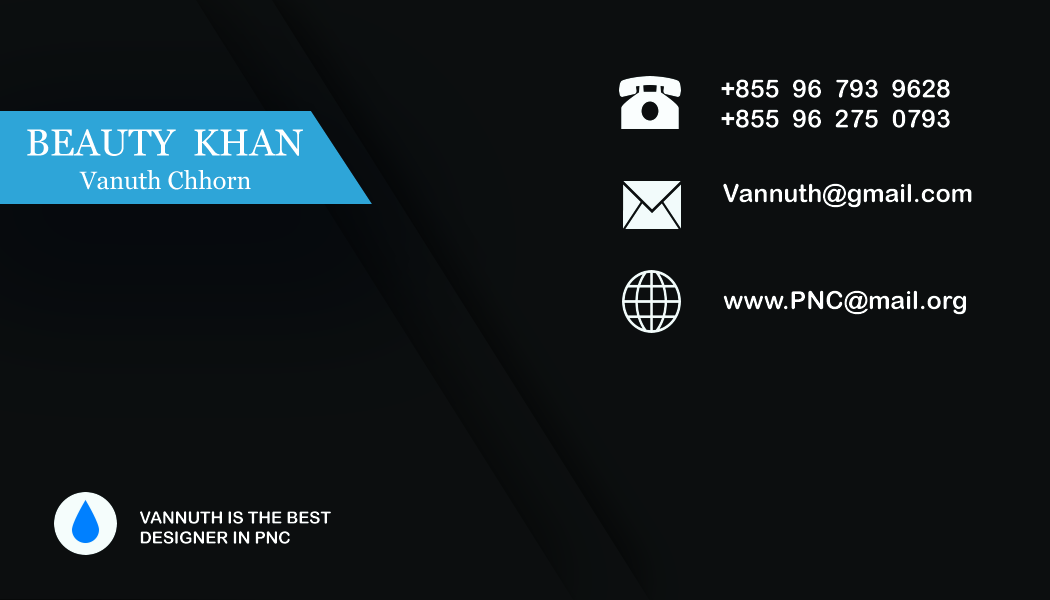
<style>
.page{position:relative;width:1050px;height:600px;background:#0c0e0f}
.page>*{position:absolute;margin:0}
.t1{font:25px "ArialRoundedMTBold";color:#ffffff}
.t2{font:37.6px "Georgia";color:#ffffff}
.t3{font:25px "Georgia";color:#ffffff}
.t4{font:16.7px "ArialRoundedMTBold";color:#ffffff}
</style>
<div class="page">
<p class="t1" style="left:721px;top:79px;width:229px;height:49px">+855  96  793  9628<br>+855  96  275  0793</p>
<p class="t2" style="left:27px;top:129px;width:276px;height:27px">BEAUTY  KHAN</p>
<p class="t3" style="left:79px;top:170px;width:172px;height:20px">Vanuth Chhorn</p>
<p class="t1" style="left:723px;top:183px;width:249px;height:25px">Vannuth@gmail.com</p>
<p class="t1" style="left:723px;top:290px;width:243px;height:25px">www.PNC@mail.org</p>
<p class="t4" style="left:140px;top:511px;width:191px;height:33px">VANNUTH IS THE BEST <br>DESIGNER IN PNC</p>
</div>
